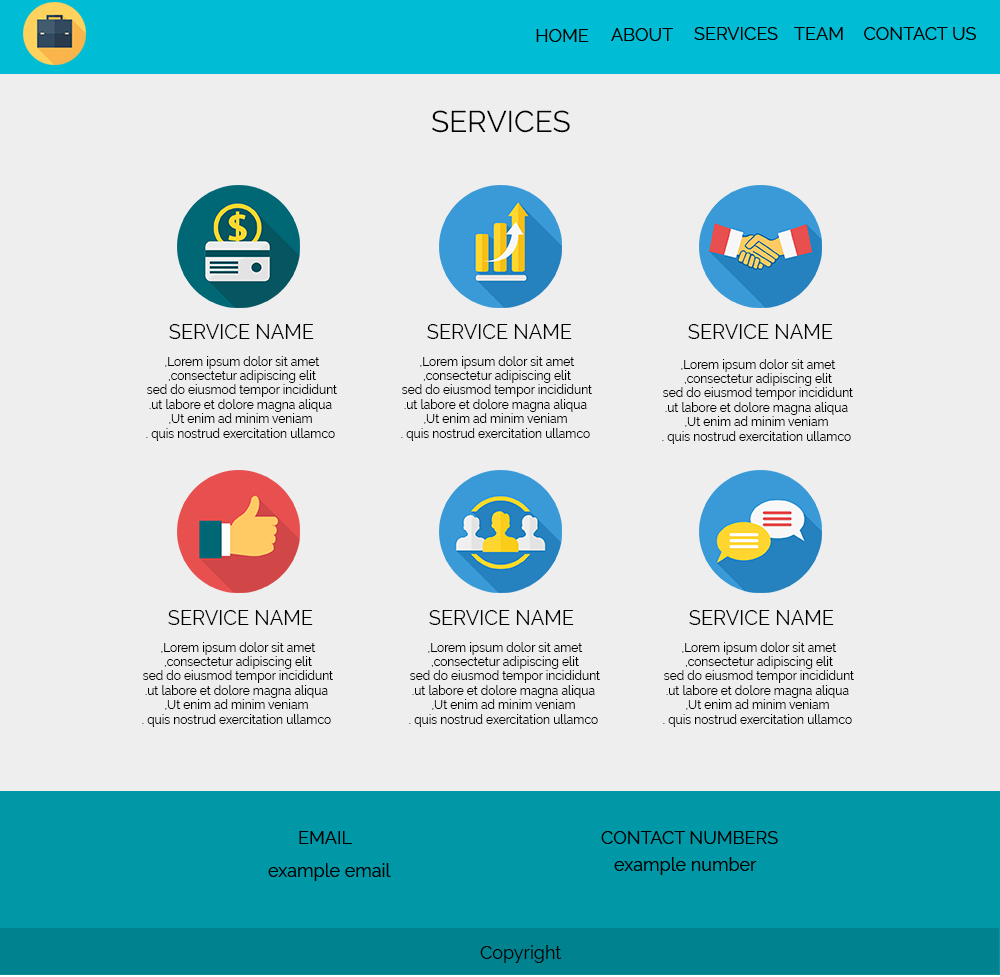
<style>
.page{position:relative;width:1000px;height:977px;background:#eeeeee}
.page>*{position:absolute;margin:0}
.t1{font:30px "Raleway-Regular";color:#000000}
.t2{font:20px "Raleway-Regular";color:#000000}
.t3{font:12px "Raleway-Regular";color:#000000}
</style>
<div class="page">
<p class="t1" style="left:432px;top:110px;width:138px;height:23px">SERVICES</p>
<p class="t2" style="left:169px;top:324px;width:145px;height:15px">SERVICE NAME</p>
<p class="t2" style="left:427px;top:324px;width:145px;height:15px">SERVICE NAME</p>
<p class="t2" style="left:688px;top:324px;width:145px;height:15px">SERVICE NAME</p>
<p class="t3" style="left:146px;top:356px;width:191px;height:85px;text-align:center">Lorem ipsum dolor sit amet, <br>consectetur adipiscing elit, <br>sed do eiusmod tempor incididunt <br>ut labore et dolore magna aliqua.<br> Ut enim ad minim veniam, <br>quis nostrud exercitation ullamco .</p>
<p class="t3" style="left:401px;top:356px;width:191px;height:85px;text-align:center">Lorem ipsum dolor sit amet, <br>consectetur adipiscing elit, <br>sed do eiusmod tempor incididunt <br>ut labore et dolore magna aliqua.<br> Ut enim ad minim veniam, <br>quis nostrud exercitation ullamco .</p>
<p class="t3" style="left:662px;top:359px;width:191px;height:85px;text-align:center">Lorem ipsum dolor sit amet, <br>consectetur adipiscing elit, <br>sed do eiusmod tempor incididunt <br>ut labore et dolore magna aliqua.<br> Ut enim ad minim veniam, <br>quis nostrud exercitation ullamco .</p>
<p class="t2" style="left:168px;top:610px;width:145px;height:15px">SERVICE NAME</p>
<p class="t2" style="left:429px;top:610px;width:145px;height:15px">SERVICE NAME</p>
<p class="t2" style="left:689px;top:610px;width:145px;height:15px">SERVICE NAME</p>
<p class="t3" style="left:142px;top:642px;width:191px;height:85px;text-align:center">Lorem ipsum dolor sit amet, <br>consectetur adipiscing elit, <br>sed do eiusmod tempor incididunt <br>ut labore et dolore magna aliqua.<br> Ut enim ad minim veniam, <br>quis nostrud exercitation ullamco .</p>
<p class="t3" style="left:409px;top:642px;width:191px;height:85px;text-align:center">Lorem ipsum dolor sit amet, <br>consectetur adipiscing elit, <br>sed do eiusmod tempor incididunt <br>ut labore et dolore magna aliqua.<br> Ut enim ad minim veniam, <br>quis nostrud exercitation ullamco .</p>
<p class="t3" style="left:663px;top:642px;width:191px;height:85px;text-align:center">Lorem ipsum dolor sit amet, <br>consectetur adipiscing elit, <br>sed do eiusmod tempor incididunt <br>ut labore et dolore magna aliqua.<br> Ut enim ad minim veniam, <br>quis nostrud exercitation ullamco .</p>
</div>
